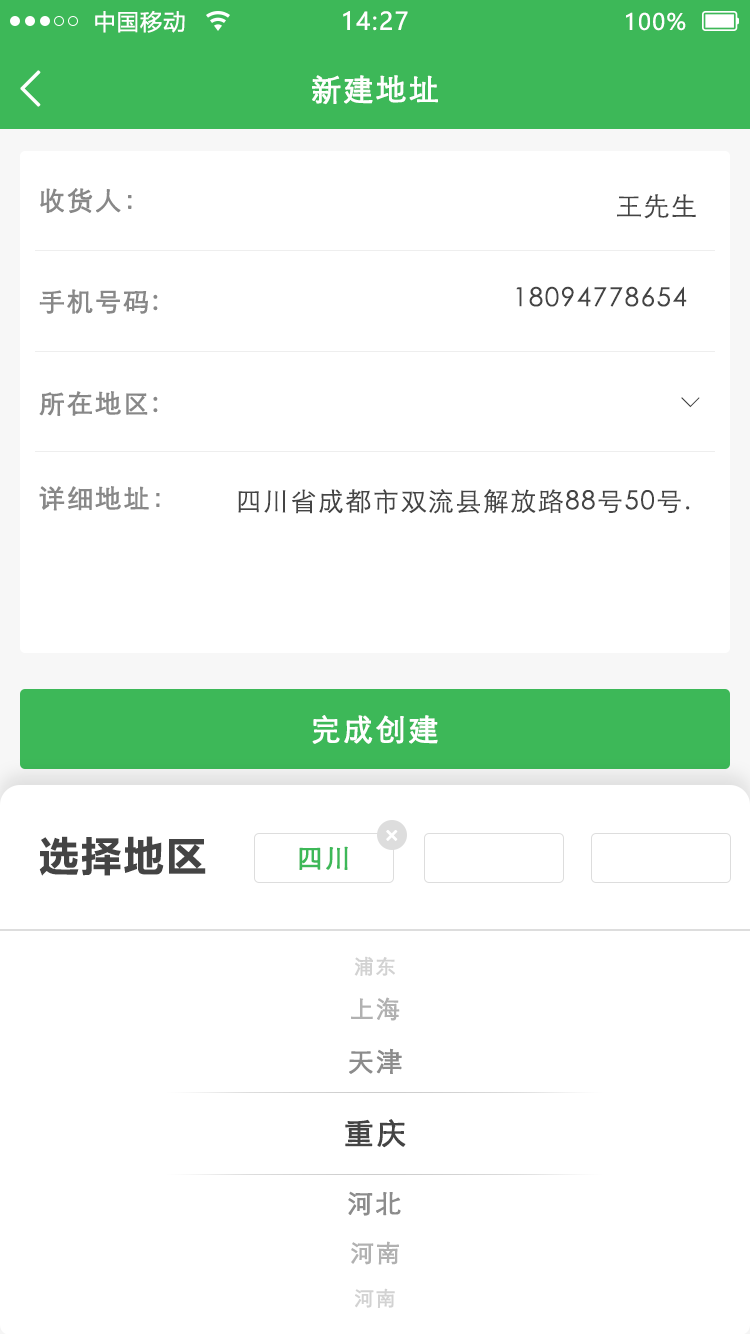
<style>
.page{position:relative;width:750px;height:1334px;background:#ffffff}
.page>*{position:absolute;margin:0}
.t1{font:22px "MicrosoftYaHei";letter-spacing:0.06em;color:#ffffff}
.t2{font:24px "MicrosoftYaHei";letter-spacing:0.06em;color:#ffffff}
.t3{font:49.8px "NSimSun";letter-spacing:0.06em;color:#fefffe;font-weight:bold}
.t4{font:30px "STXihei";letter-spacing:0.06em;color:#fefffe;font-weight:bold}
.t5{font:25.9px "STXihei";letter-spacing:0.06em;color:#888888;font-weight:bold}
.t6{font:26px "STXihei";letter-spacing:0.06em;color:#444444}
.t7{font:25.9px "NSimSun";letter-spacing:0.06em;color:#444444}
.t8{font:25.9px "STXihei";letter-spacing:0.06em;color:#444444}
.t9{font:30px "STXihei";letter-spacing:0.06em;color:#ffffff;font-weight:bold}
.t10{font:40px "MicrosoftYaHei-Bold";letter-spacing:0.06em;color:#444444}
.t11{font:26px "STXihei";letter-spacing:0.06em;color:#3db858;font-weight:bold}
.t12{font:20px "STXihei";letter-spacing:0.06em;color:#d2d2d2;font-weight:bold}
.t13{font:24px "STXihei";letter-spacing:0.06em;color:#b1b1b1;font-weight:bold}
.t14{font:26px "STXihei";letter-spacing:0.06em;color:#8c8c8c;font-weight:bold}
.t15{font:30px "STXihei";letter-spacing:0.06em;color:#444444;font-weight:bold}
</style>
<div class="page">
<p class="t1" style="left:95px;top:10px;width:90px;height:23px">中国移动</p>
<p class="t2" style="left:343px;top:11px;width:65px;height:20px">14:27</p>
<p class="t1" style="left:626px;top:12px;width:60px;height:19px">100%</p>
<p class="t3" style="left:20px;top:70px;width:21px;height:37px">&lt;</p>
<p class="t4" style="left:312px;top:75px;width:126px;height:30px">新建地址</p>
<p class="t5" style="left:40px;top:188px;width:92px;height:26px">收货人：</p>
<p class="t6" style="left:617px;top:194px;width:79px;height:25px">王先生</p>
<p class="t5" style="left:39px;top:289px;width:119px;height:25px">手机号码:</p>
<p class="t6" style="left:516px;top:286px;width:171px;height:21px">18094778654</p>
<p class="t5" style="left:39px;top:391px;width:119px;height:25px">所在地区:</p>
<p class="t7" style="left:681px;top:397px;width:19px;height:11px;rotate:90deg">&gt;</p>
<p class="t5" style="left:39px;top:486px;width:121px;height:25px">详细地址：</p>
<p class="t8" style="left:238px;top:489px;width:452px;height:25px">四川省成都市双流县解放路88号50号.</p>
<p class="t9" style="left:312px;top:715px;width:126px;height:29px">完成创建</p>
<p class="t10" style="left:39px;top:836px;width:167px;height:40px">选择地区</p>
<p class="t11" style="left:299px;top:846px;width:49px;height:24px">四川</p>
<p class="t12" style="left:354px;top:956px;width:41px;height:20px">浦东</p>
<p class="t13" style="left:351px;top:997px;width:49px;height:24px">上海</p>
<p class="t14" style="left:349px;top:1048px;width:53px;height:26px">天津</p>
<p class="t15" style="left:345px;top:1119px;width:61px;height:29px">重庆</p>
<p class="t14" style="left:348px;top:1191px;width:53px;height:25px">河北</p>
<p class="t13" style="left:351px;top:1241px;width:48px;height:24px">河南</p>
<p class="t12" style="left:355px;top:1288px;width:40px;height:20px">河南</p>
</div>
